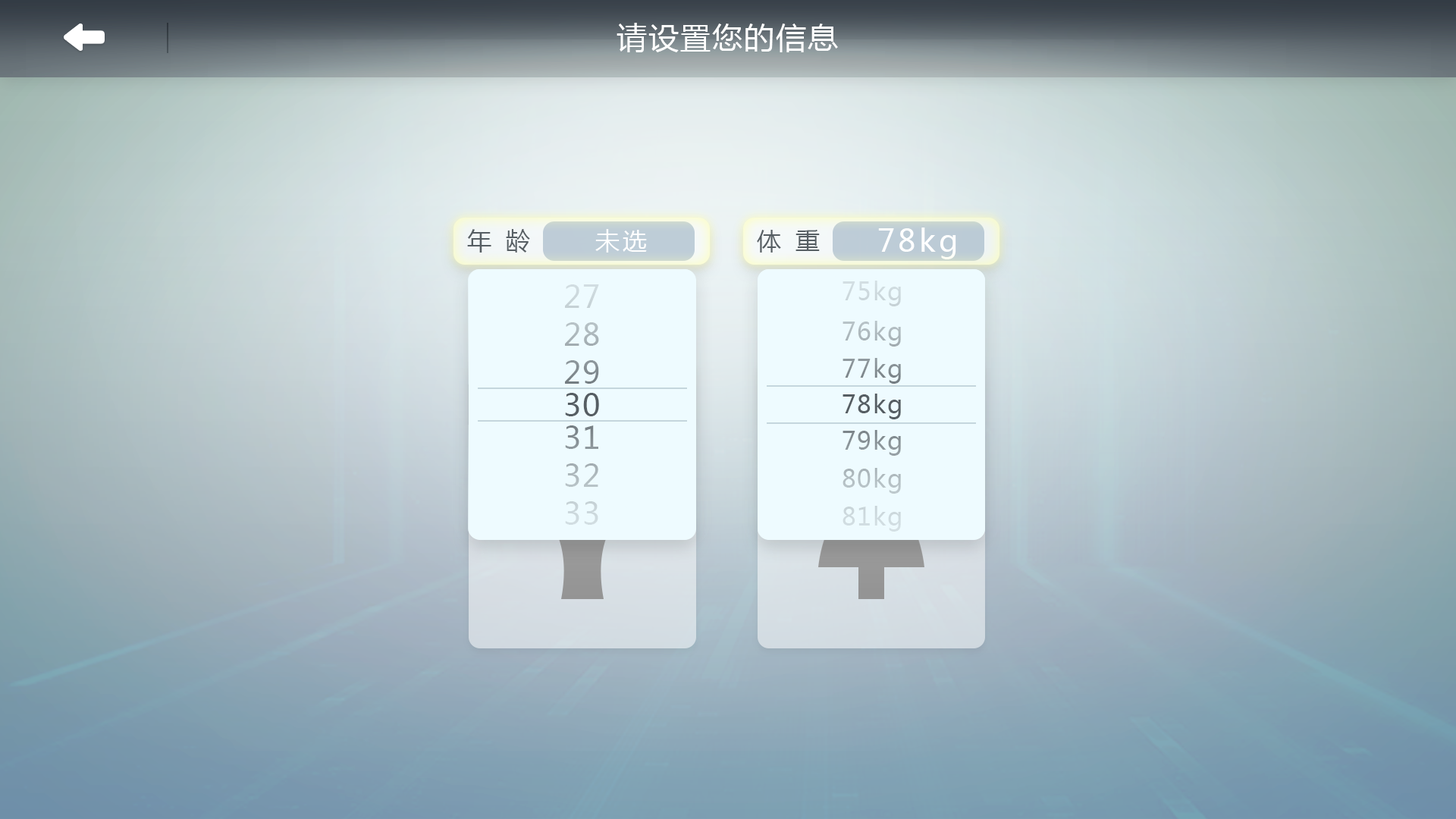
<style>
.page{position:relative;width:1456px;height:819px}
.page>*{position:absolute;margin:0}
.t1{font:30.3px "MicrosoftYaHei";letter-spacing:0.05em;color:#ffffff}
.t2{font:24.3px "MicrosoftYaHei";color:#565e63}
.t3{font:24.3px "MicrosoftYaHei";letter-spacing:0.1em;color:#ffffff}
.t4{font:30.3px "MicrosoftYaHei";letter-spacing:0.1em;color:#ffffff}
.t5{font:24.3px "MicrosoftYaHei";letter-spacing:0.05em;color:#cedadf}
.t6{font:30.3px "MicrosoftYaHei";letter-spacing:0.05em;color:#ccd8dc}
.t7{font:30.3px "MicrosoftYaHei";letter-spacing:0.05em;color:#acb7bc}
.t8{font:24.3px "MicrosoftYaHei";letter-spacing:0.05em;color:#afbabe}
.t9{font:30.3px "MicrosoftYaHei";letter-spacing:0.05em;color:#828b90}
.t10{font:24.3px "MicrosoftYaHei";letter-spacing:0.05em;color:#868f94}
.t11{font:30.3px "MicrosoftYaHei";letter-spacing:0.05em;color:#565e63}
.t12{font:24.3px "MicrosoftYaHei";letter-spacing:0.05em;color:#565e63}
.t13{font:30.3px "MicrosoftYaHei";letter-spacing:0.05em;color:#838d91}
.t14{font:24.3px "MicrosoftYaHei";letter-spacing:0.05em;color:#879095}
.t15{font:30.3px "MicrosoftYaHei";letter-spacing:0.05em;color:#afbabe}
.t16{font:24.3px "MicrosoftYaHei";letter-spacing:0.05em;color:#b3bec2}
.t17{font:24.3px "MicrosoftYaHei";letter-spacing:0.05em;color:#cfdbdf}
</style>
<div class="page">
<p class="t1" style="left:617px;top:23px;width:221px;height:29px">请设置您的信息</p>
<p class="t2" style="left:467px;top:229px;width:63px;height:24px">年  龄</p>
<p class="t3" style="left:595px;top:229px;width:52px;height:24px">未选</p>
<p class="t2" style="left:757px;top:230px;width:63px;height:23px">体  重</p>
<p class="t4" style="left:878px;top:227px;width:78px;height:32px">78kg</p>
<p class="t5" style="left:842px;top:281px;width:59px;height:25px">75kg</p>
<p class="t6" style="left:565px;top:284px;width:34px;height:24px">27</p>
<p class="t7" style="left:565px;top:322px;width:34px;height:24px">28</p>
<p class="t8" style="left:842px;top:321px;width:59px;height:26px">76kg</p>
<p class="t9" style="left:565px;top:360px;width:34px;height:24px">29</p>
<p class="t10" style="left:842px;top:358px;width:59px;height:26px">77kg</p>
<p class="t11" style="left:565px;top:393px;width:34px;height:23px">30</p>
<p class="t12" style="left:842px;top:394px;width:59px;height:25px">78kg</p>
<p class="t13" style="left:565px;top:425px;width:33px;height:24px">31</p>
<p class="t14" style="left:842px;top:430px;width:59px;height:26px">79kg</p>
<p class="t15" style="left:565px;top:463px;width:33px;height:24px">32</p>
<p class="t16" style="left:842px;top:468px;width:59px;height:26px">80kg</p>
<p class="t6" style="left:565px;top:501px;width:33px;height:24px">33</p>
<p class="t17" style="left:842px;top:506px;width:59px;height:26px">81kg</p>
</div>
